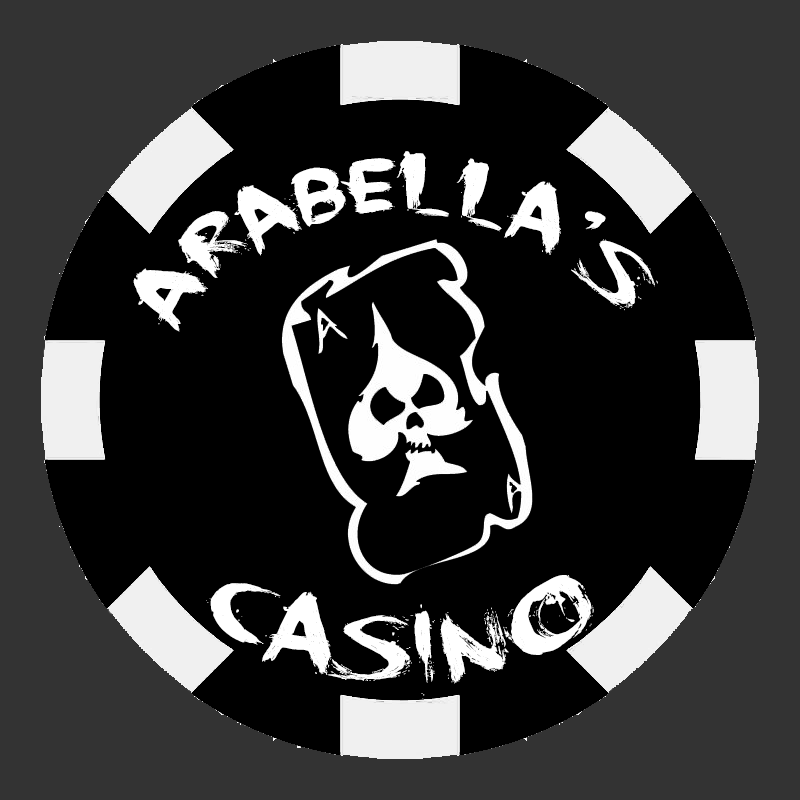
<style>
.page{position:relative;width:800px;height:800px;background:#000000}
.page>*{position:absolute;margin:0}
.t1{font:100px "DKFaceYourFears";color:#ffffff}
.t2{font:120px "DKFaceYourFears";color:#ffffff}
</style>
<div class="page">
<p class="t1" style="left:133px;top:151px;width:525px;height:181px;rotate:-2deg">Arabella’s</p>
<p class="t2" style="left:206px;top:575px;width:388px;height:124px">Casino</p>
</div>
